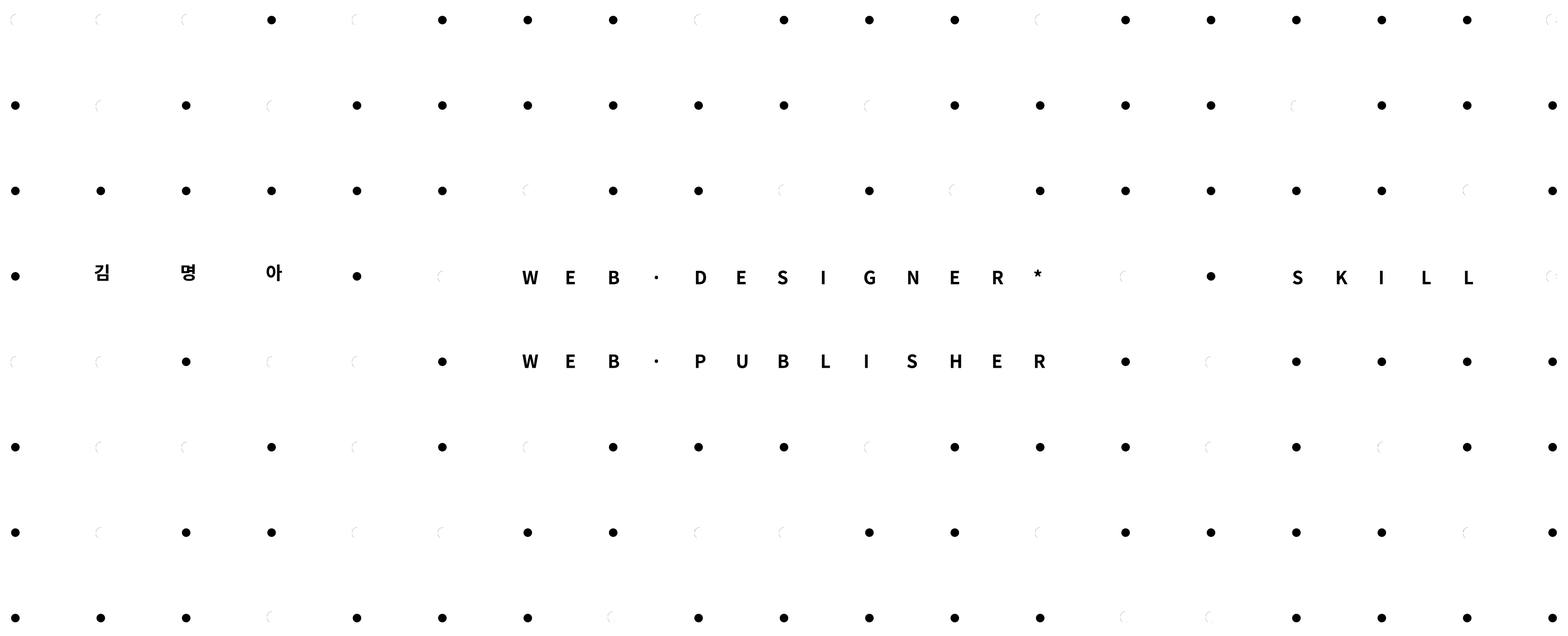
<style>
.page{position:relative;width:1568px;height:636px;background:#ffffff}
.page>*{position:absolute;margin:0}
.t1{font:17.9px "SpoqaHanSans-Bold";color:#000000}
.t2{font:18px "SpoqaHanSans-Bold";color:#000000}
</style>
<div class="page">
<p class="t1" style="left:94px;top:264px;width:14px;height:17px">김</p>
<p class="t1" style="left:181px;top:264px;width:14px;height:17px">명</p>
<p class="t1" style="left:266px;top:264px;width:16px;height:17px">아</p>
<p class="t2" style="left:1034px;top:269px;width:7px;height:8px">*</p>
<p class="t2" style="left:522px;top:271px;width:16px;height:13px">W</p>
<p class="t2" style="left:566px;top:271px;width:9px;height:13px">E</p>
<p class="t2" style="left:609px;top:271px;width:10px;height:13px">B</p>
<p class="t2" style="left:655px;top:275px;width:3px;height:4px">·</p>
<p class="t2" style="left:696px;top:271px;width:10px;height:13px">D</p>
<p class="t2" style="left:737px;top:271px;width:9px;height:13px">E</p>
<p class="t2" style="left:778px;top:270px;width:10px;height:14px">S</p>
<p class="t2" style="left:822px;top:271px;width:3px;height:13px">I</p>
<p class="t2" style="left:864px;top:270px;width:11px;height:14px">G</p>
<p class="t2" style="left:908px;top:271px;width:11px;height:13px">N</p>
<p class="t2" style="left:951px;top:271px;width:9px;height:13px">E</p>
<p class="t2" style="left:993px;top:271px;width:10px;height:13px">R</p>
<p class="t2" style="left:1293px;top:270px;width:10px;height:14px">S</p>
<p class="t2" style="left:1337px;top:271px;width:11px;height:13px">K</p>
<p class="t2" style="left:1380px;top:271px;width:3px;height:13px">I</p>
<p class="t2" style="left:1422px;top:271px;width:9px;height:13px">L</p>
<p class="t2" style="left:1465px;top:271px;width:8px;height:13px">L</p>
<p class="t2" style="left:907px;top:354px;width:10px;height:14px">S</p>
<p class="t2" style="left:522px;top:354px;width:16px;height:14px">W</p>
<p class="t2" style="left:566px;top:354px;width:9px;height:14px">E</p>
<p class="t2" style="left:609px;top:354px;width:10px;height:14px">B</p>
<p class="t2" style="left:655px;top:359px;width:3px;height:4px">·</p>
<p class="t2" style="left:696px;top:354px;width:9px;height:14px">P</p>
<p class="t2" style="left:737px;top:354px;width:11px;height:14px">U</p>
<p class="t2" style="left:778px;top:354px;width:11px;height:14px">B</p>
<p class="t2" style="left:822px;top:354px;width:8px;height:14px">L</p>
<p class="t2" style="left:865px;top:354px;width:3px;height:14px">I</p>
<p class="t2" style="left:951px;top:354px;width:10px;height:14px">H</p>
<p class="t2" style="left:993px;top:354px;width:9px;height:14px">E</p>
<p class="t2" style="left:1035px;top:354px;width:10px;height:14px">R</p>
</div>
